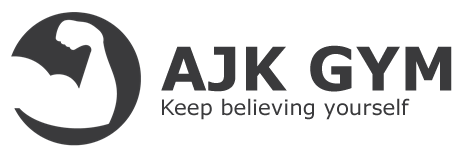
<style>
.page{position:relative;width:464px;height:156px;background:#ffffff}
.page>*{position:absolute;margin:0}
.t1{font:60px "Verdana-Bold";color:#3a3a3c}
.t2{font:21.3px "Verdana";color:#3a3a3c}
</style>
<div class="page">
<p class="t1" style="left:161px;top:45px;width:291px;height:47px">AJK GYM</p>
<p class="t2" style="left:162px;top:98px;width:248px;height:22px">Keep believing yourself</p>
</div>
